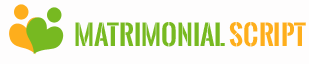
<style>
.page{position:relative;width:309px;height:64px;background:#fefdfd}
.page>*{position:absolute;margin:0}
.t1{font:27.1px "OswaldStencil-Bold";color:#77b921}
.t2{font:27.1px "OswaldStencil-Bold";color:#feae1c}
</style>
<div class="page">
<p class="t1" style="left:75px;top:22px;width:231px;height:25px">Matrimonial <span class="t2">Script</span></p>
</div>
